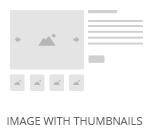
<style>
.page{position:relative;width:150px;height:130px;background:#ffffff}
.page>*{position:absolute;margin:0}
.t1{font:11px "OpenSans";color:#686868;text-transform:uppercase}
</style>
<div class="page">
<p class="t1" style="left:7px;top:117px;width:136px;height:8px">Image with Thumbnails</p>
</div>
